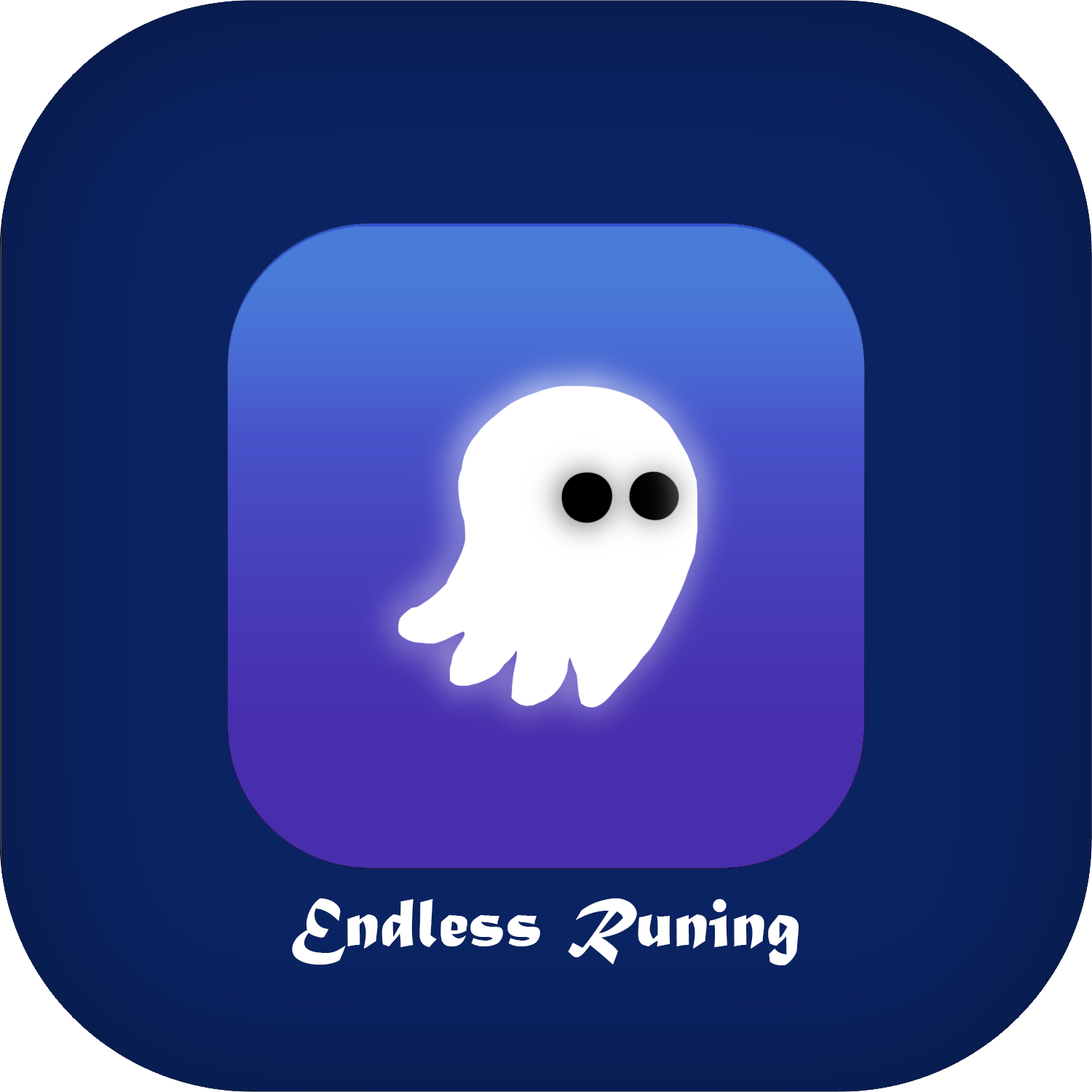
<style>
.page{position:relative;width:1092px;height:1092px}
.page>*{position:absolute;margin:0}
.t1{font:72.8px "MaturaMTScriptCapitals";color:#ffffff}
</style>
<div class="page">
<p class="t1" style="left:292px;top:898px;width:507px;height:67px">Endless Runing</p>
</div>
